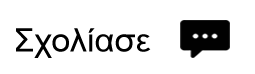
<style>
.page{position:relative;width:255px;height:74px;background:#ffffff}
.page>*{position:absolute;margin:0}
.t1{font:32.1px "ArialMT";color:#000000;scale:1.07 1}
</style>
<div class="page">
<p class="t1" style="left:16px;top:28px;width:135px;height:30px">Σχολίασε</p>
</div>
